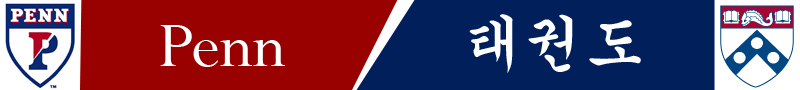
<style>
.page{position:relative;width:800px;height:90px;background:#011f5b}
.page>*{position:absolute;margin:0}
.t1{font:60px "GungsuhChe";color:#ffffff}
.t2{font:72px "Perpetua";color:#ffffff}
</style>
<div class="page">
<p class="t1" style="left:469px;top:14px;width:172px;height:59px">태권도</p>
<p class="t2" style="left:160px;top:25px;width:125px;height:42px">Penn</p>
</div>
